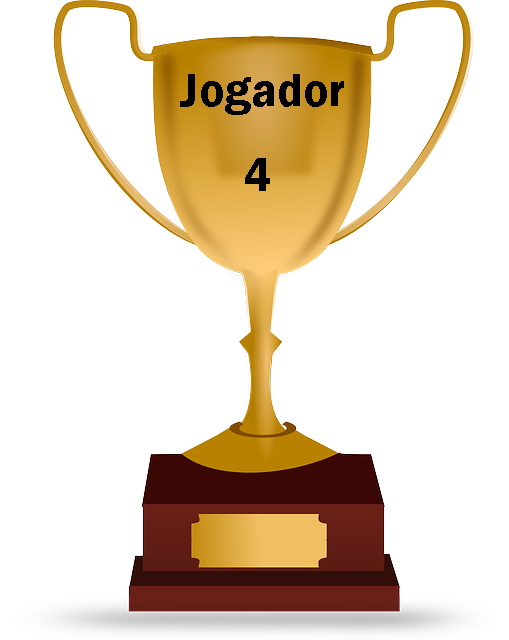
<style>
.page{position:relative;width:509px;height:640px;background:#ffffff}
.page>*{position:absolute;margin:0}
.t1{font:48px "FranklinGothic-Demi";color:#010101}
.t2{font:48px "FranklinGothic-Demi";color:#000000}
</style>
<div class="page">
<p class="t1" style="left:180px;top:74px;width:164px;height:41px">Jogador</p>
<p class="t2" style="left:245px;top:158px;width:25px;height:33px">4</p>
</div>
